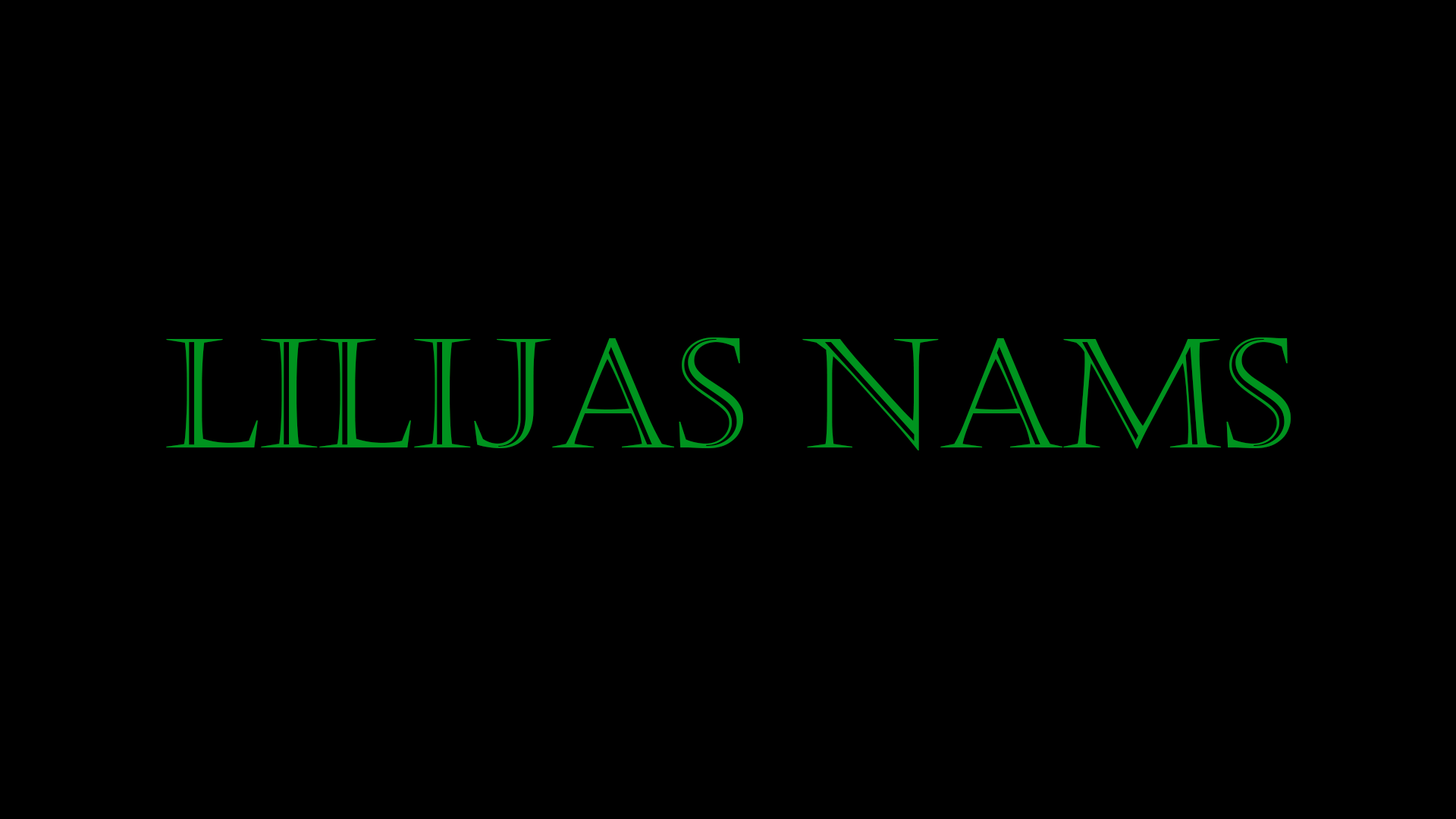
<style>
.page{position:relative;width:1456px;height:819px;background:#000000}
.page>*{position:absolute;margin:0}
.t1{font:151.7px "Castellar";color:#00941f}
</style>
<div class="page">
<p class="t1" style="left:166px;top:337px;width:1125px;height:113px">LILIJAS NAMS</p>
</div>
